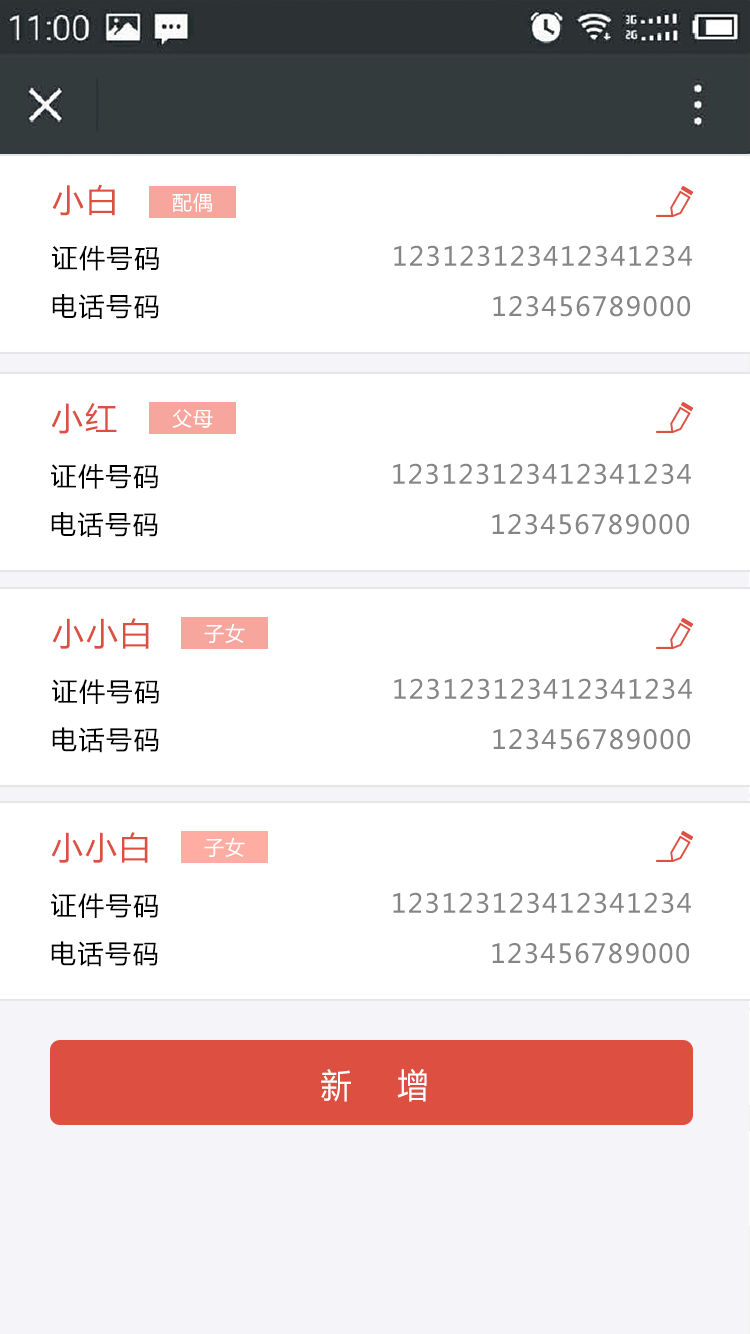
<style>
.page{position:relative;width:750px;height:1334px;background:#ffffff}
.page>*{position:absolute;margin:0}
.t1{font:32px "MicrosoftYaHei";letter-spacing:0.06em;color:#dd5041}
.t2{font:20px "MicrosoftYaHei";letter-spacing:0.06em;color:#ffffff}
.t3{font:26px "MicrosoftYaHei";letter-spacing:0.06em;color:#030303}
.t4{font:26px "MicrosoftYaHei";letter-spacing:0.06em;color:#858585}
.t5{font:26px "MicrosoftYaHei";letter-spacing:0.06em;color:#000000}
.t6{font:34px "MicrosoftYaHei";letter-spacing:1.5em;color:#ffffff;scale:0.9 1}
</style>
<div class="page">
<p class="t1" style="left:52px;top:184px;width:63px;height:32px">小白</p>
<p class="t2" style="left:172px;top:193px;width:40px;height:19px">配偶</p>
<p class="t3" style="left:52px;top:245px;width:107px;height:26px">证件号码</p>
<p class="t4" style="left:394px;top:245px;width:298px;height:21px">123123123412341234</p>
<p class="t5" style="left:52px;top:294px;width:107px;height:25px">电话号码</p>
<p class="t4" style="left:493px;top:296px;width:198px;height:21px">123456789000</p>
<p class="t1" style="left:51px;top:403px;width:66px;height:31px">小红</p>
<p class="t2" style="left:172px;top:409px;width:41px;height:19px">父母</p>
<p class="t3" style="left:51px;top:464px;width:107px;height:25px">证件号码</p>
<p class="t4" style="left:393px;top:463px;width:298px;height:21px">123123123412341234</p>
<p class="t5" style="left:51px;top:512px;width:107px;height:25px">电话号码</p>
<p class="t4" style="left:492px;top:514px;width:198px;height:21px">123456789000</p>
<p class="t1" style="left:52px;top:618px;width:97px;height:31px">小小白</p>
<p class="t2" style="left:204px;top:623px;width:41px;height:21px">子女</p>
<p class="t4" style="left:394px;top:678px;width:298px;height:21px">123123123412341234</p>
<p class="t3" style="left:52px;top:679px;width:107px;height:25px">证件号码</p>
<p class="t5" style="left:52px;top:727px;width:107px;height:26px">电话号码</p>
<p class="t4" style="left:493px;top:729px;width:198px;height:21px">123456789000</p>
<p class="t1" style="left:51px;top:832px;width:97px;height:31px">小小白</p>
<p class="t2" style="left:204px;top:837px;width:41px;height:21px">子女</p>
<p class="t3" style="left:51px;top:893px;width:107px;height:25px">证件号码</p>
<p class="t4" style="left:393px;top:892px;width:298px;height:21px">123123123412341234</p>
<p class="t5" style="left:51px;top:941px;width:107px;height:26px">电话号码</p>
<p class="t4" style="left:492px;top:943px;width:198px;height:21px">123456789000</p>
<p class="t6" style="left:321px;top:1068px;width:106px;height:34px">新增</p>
</div>
